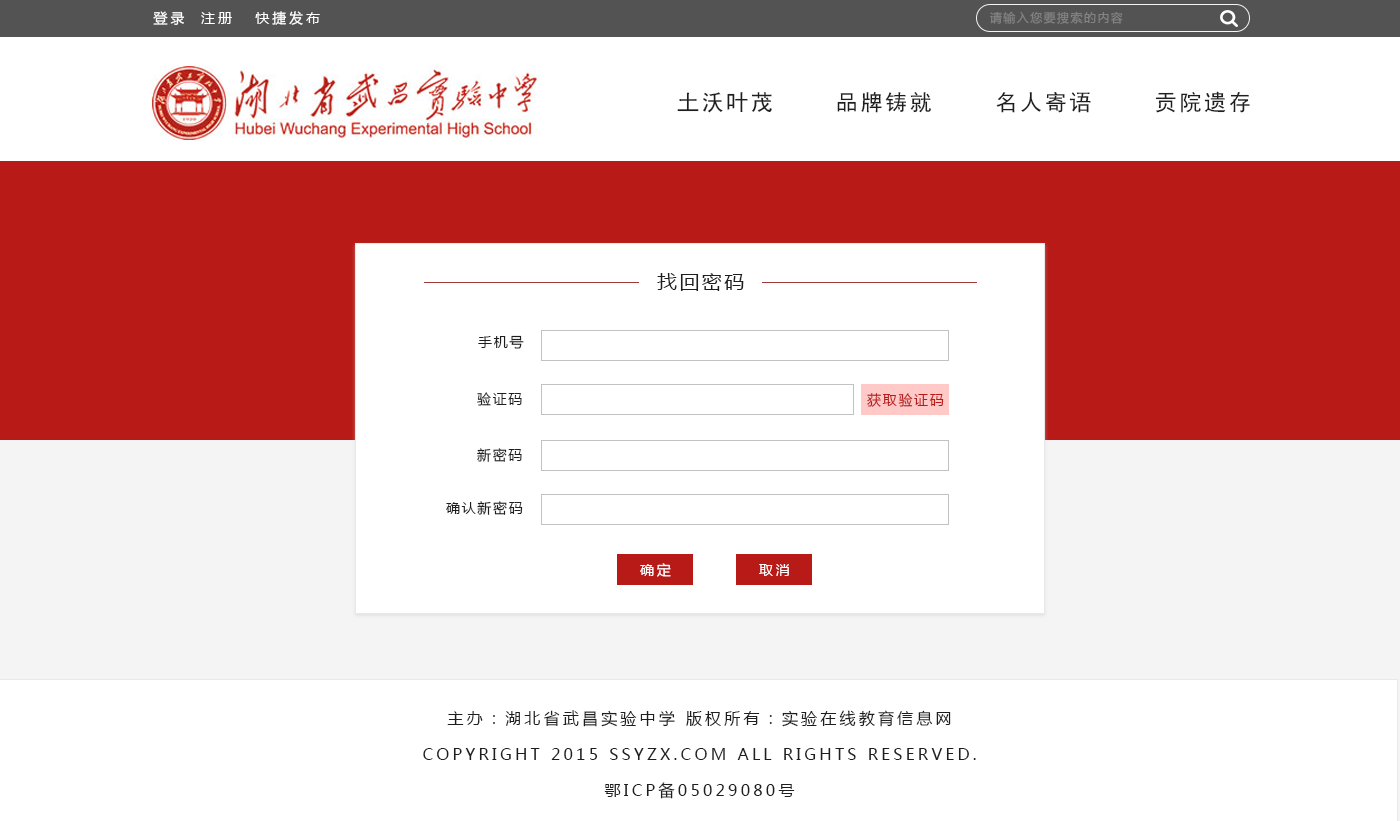
<style>
.page{position:relative;width:1400px;height:821px;background:#ffffff}
.page>*{position:absolute;margin:0}
.t1{font:14px "MicrosoftYaHei";letter-spacing:0.2em;color:#ffffff}
.t2{font:12px "MicrosoftYaHei";letter-spacing:0.12em;color:#848484}
.t3{font:22px "SimHei";letter-spacing:0.12em;color:#1e1e1e}
.t4{font:20px "MicrosoftYaHei";letter-spacing:0.12em;color:#1e1e1e}
.t5{font:14px "MicrosoftYaHei";letter-spacing:0.12em;color:#1e1e1e}
.t6{font:14px "MicrosoftYaHei";letter-spacing:0.12em;color:#b81b17}
.t7{font:16px/36px "MicrosoftYaHei";letter-spacing:0.2em;color:#1e1e1e}
</style>
<div class="page">
<p class="t1" style="left:153px;top:11px;width:167px;height:14px">登录  注册   快捷发布</p>
<p class="t2" style="left:989px;top:11px;width:134px;height:13px">请输入您要搜索的内容</p>
<p class="t3" style="left:677px;top:92px;width:95px;height:21px">土沃叶茂</p>
<p class="t3" style="left:837px;top:92px;width:94px;height:21px">品牌铸就</p>
<p class="t3" style="left:996px;top:92px;width:95px;height:21px">名人寄语</p>
<p class="t3" style="left:1155px;top:91px;width:95px;height:22px">贡院遗存</p>
<p class="t4" style="left:657px;top:273px;width:87px;height:18px">找回密码</p>
<p class="t5" style="left:478px;top:335px;width:46px;height:14px">手机号</p>
<p class="t5" style="left:477px;top:392px;width:45px;height:14px">验证码</p>
<p class="t6" style="left:867px;top:393px;width:77px;height:14px">获取验证码</p>
<p class="t5" style="left:477px;top:448px;width:45px;height:14px">新密码</p>
<p class="t5" style="left:446px;top:501px;width:77px;height:14px">确认新密码</p>
<p class="t1" style="left:640px;top:563px;width:31px;height:14px">确定</p>
<p class="t1" style="left:759px;top:564px;width:30px;height:12px">取消</p>
<p class="t7" style="left:423px;top:710px;width:553px;height:89px;text-align:center">主办：湖北省武昌实验中学 版权所有：实验在线教育信息网<br>COPYRIGHT 2015 SSYZX.COM ALL RIGHTS RESERVED.<br>鄂ICP备05029080号</p>
</div>
